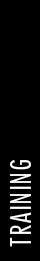
<style>
.page{position:relative;width:40px;height:261px;background:#000000}
.page>*{position:absolute;margin:0}
.t1{font:28px "FuturaStd-CondensedLight";letter-spacing:0.06em;color:#ffffff;text-transform:uppercase}
</style>
<div class="page">
<p class="t1" style="left:10px;top:160px;width:21px;height:87px;rotate:-90deg">Training</p>
</div>
